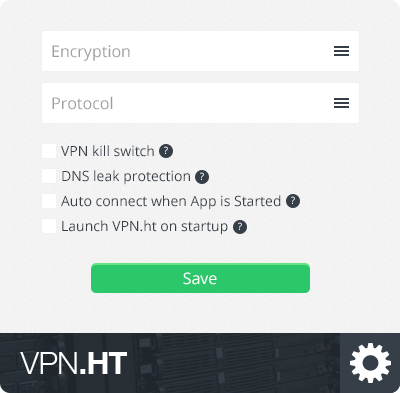
<style>
.page{position:relative;width:400px;height:393px}
.page>*{position:absolute;margin:0}
.t1{font:16px "OpenSans";color:#9e9e9e}
.t2{font:14px "OpenSans";color:#363f48}
.t3{font:10px "OpenSans";color:#feffff}
.t4{font:16px "OpenSans";color:#ffffff}
</style>
<div class="page">
<p class="t1" style="left:52px;top:45px;width:78px;height:16px">Encryption</p>
<p class="t1" style="left:52px;top:96px;width:61px;height:14px">Protocol</p>
<p class="t2" style="left:61px;top:145px;width:93px;height:12px">VPN kill switch</p>
<p class="t3" style="left:164px;top:146px;width:4px;height:8px">?</p>
<p class="t2" style="left:62px;top:170px;width:128px;height:15px">DNS leak protection</p>
<p class="t3" style="left:200px;top:172px;width:4px;height:8px">?</p>
<p class="t2" style="left:61px;top:195px;width:220px;height:15px">Auto connect when App is Started</p>
<p class="t3" style="left:291px;top:196px;width:4px;height:8px">?</p>
<p class="t2" style="left:62px;top:220px;width:166px;height:15px">Launch VPN.ht on startup</p>
<p class="t3" style="left:238px;top:222px;width:4px;height:8px">?</p>
<p class="t4" style="left:183px;top:272px;width:34px;height:13px">Save</p>
</div>
